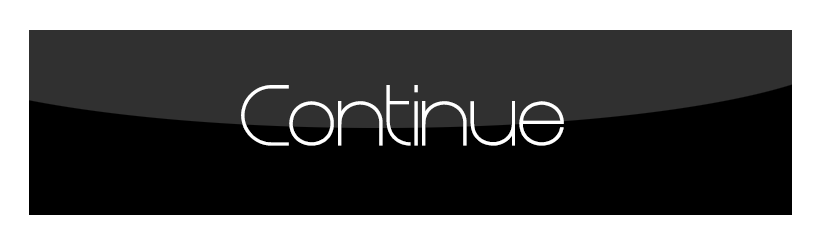
<style>
.page{position:relative;width:822px;height:244px;background:#000000}
.page>*{position:absolute;margin:0}
.t1{font:72px "Steiner";color:#ffffff}
</style>
<div class="page">
<p class="t1" style="left:241px;top:85px;width:323px;height:61px">Continue</p>
</div>
